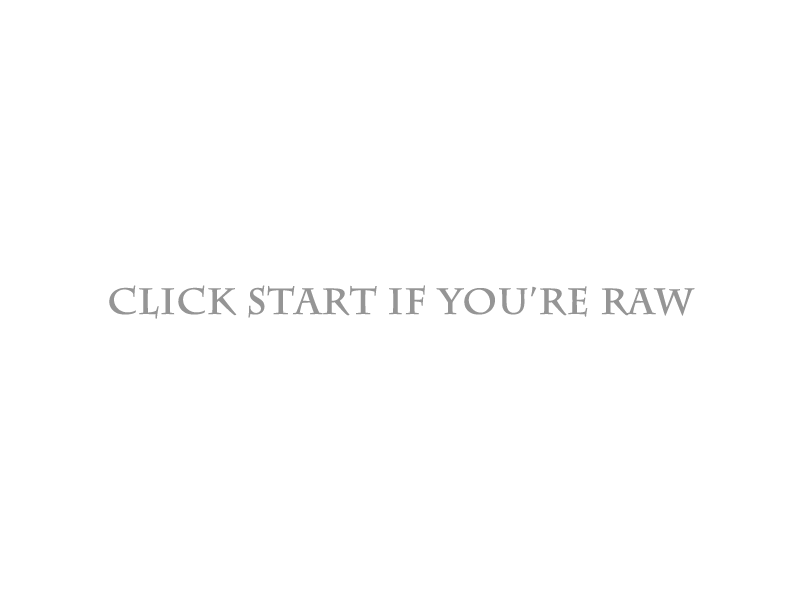
<style>
.page{position:relative;width:800px;height:600px;background:#ffffff}
.page>*{position:absolute;margin:0}
.t1{font:36px "CharlemagneStd-Bold";color:#959595;font-weight:bold}
</style>
<div class="page">
<p class="t1" style="left:109px;top:285px;width:586px;height:34px">Click Start IF YOU’RE RAW</p>
</div>
